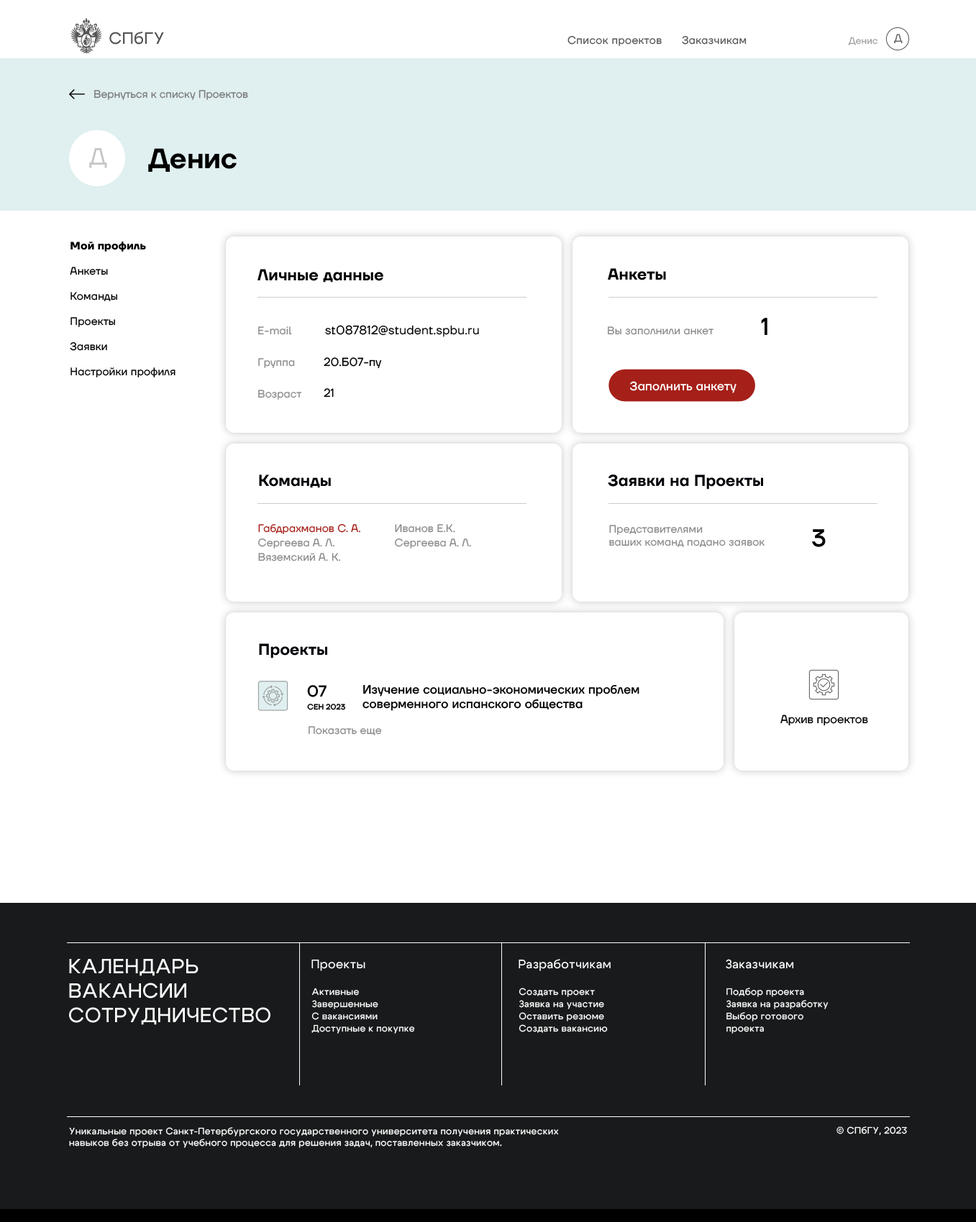
<style>
.page{position:relative;width:976px;height:1222px;background:#ffffff}
.page>*{position:absolute;margin:0}
.t1{font:16.3px "Cygre-Medium";letter-spacing:0.025em;color:#555555}
.t2{font:10.8px "TTFirsNeue-Regular";letter-spacing:0.025em;color:#555555}
.t3{font:9.3px "TTFirsNeue-Regular";letter-spacing:0.01em;color:#9c9c9c}
.t4{font:10.8px "TTFirsNeue-Regular";color:#636466}
.t5{font:10.8px "TTFirsNeue-Regular";color:#77787b}
.t6{font:23.7px "TTFirsNeue-Regular";color:#c4c6c8}
.t7{font:28px "TTFirsNeue-DemiBold";color:#000000}
.t8{font:10.8px/25.2px "TTFirsNeue-Regular";letter-spacing:0.013em;color:#000000}
.t9{font:10.8px/25.2px "TTFirsNeue-Bold";letter-spacing:0.013em;color:#000000}
.t10{font:15.8px "TTFirsNeue-DemiBold";letter-spacing:0.01em;color:#000000}
.t11{font:24.4px "TTFirsNeue-Medium";letter-spacing:0.025em;color:#000000}
.t12{font:10.8px "TTFirsNeue-Regular";letter-spacing:0.01em;color:#898989}
.t13{font:12.2px "TTFirsNeue-Regular";letter-spacing:0.01em;color:#000000}
.t14{font:11.5px "TTFirsNeue-Regular";color:#000000}
.t15{font:12.2px "TTFirsNeue-Medium";letter-spacing:0.01em;color:#ffffff}
.t16{font:15.8px "TTFirsNeue-DemiBold";letter-spacing:0.01em;color:#000007}
.t17{font:10.8px/14.4px "TTFirsNeue-Regular";letter-spacing:0.01em;color:#898989}
.t18{font:10.8px/14.4px "TTFirsNeue-Regular";letter-spacing:0.01em;color:#a52019}
.t19{font:15.9px "TTFirsNeue-Medium";color:#000000}
.t20{font:12.2px "TTFirsNeue-Medium";letter-spacing:0.01em;color:#000000}
.t21{font:7.8px "TTFirsNeue-Medium";color:#000000}
.t22{font:20.4px "Cygre-Medium";letter-spacing:0.025em;color:#ffffff}
.t23{font:12.2px "Cygre-Medium";letter-spacing:0.025em;color:#ffffff}
.t24{font:9.4px/12.2px "Cygre-Medium";letter-spacing:0.025em;color:#ffffff}
.t25{font:9.4px "Cygre-Medium";letter-spacing:0.025em;color:#ffffff}
</style>
<div class="page">
<p class="t1" style="left:109px;top:31px;width:55px;height:14px">СПбГУ</p>
<p class="t2" style="left:567px;top:36px;width:179px;height:10px">Список проектов      Заказчикам</p>
<p class="t3" style="left:848px;top:37px;width:29px;height:8px">Денис</p>
<p class="t4" style="left:894px;top:34px;width:8px;height:10px">Д</p>
<p class="t5" style="left:94px;top:90px;width:154px;height:10px">Вернуться к списку Проектов</p>
<p class="t6" style="left:89px;top:148px;width:18px;height:20px">Д</p>
<p class="t7" style="left:148px;top:148px;width:89px;height:24px">Денис</p>
<p class="t8" style="left:70px;top:242px;width:105px;height:135px"><span class="t9">Мой профиль<br></span>Анкеты<br>Команды<br>Проекты<br>Заявки<br>Настройки профиля</p>
<p class="t10" style="left:257px;top:269px;width:126px;height:14px">Личные данные</p>
<p class="t10" style="left:608px;top:268px;width:58px;height:12px">Анкеты</p>
<p class="t11" style="left:761px;top:318px;width:6px;height:17px">1</p>
<p class="t12" style="left:258px;top:326px;width:34px;height:9px">E-mail</p>
<p class="t13" style="left:325px;top:325px;width:154px;height:12px">st087812@student.spbu.ru</p>
<p class="t12" style="left:608px;top:326px;width:105px;height:9px">Вы заполнили анкет</p>
<p class="t12" style="left:258px;top:358px;width:37px;height:10px">Группа</p>
<p class="t14" style="left:324px;top:357px;width:58px;height:12px">20.Б07-пу</p>
<p class="t12" style="left:258px;top:390px;width:44px;height:10px">Возраст</p>
<p class="t14" style="left:324px;top:388px;width:10px;height:10px">21</p>
<p class="t15" style="left:629px;top:381px;width:107px;height:12px">Заполнить анкету</p>
<p class="t16" style="left:259px;top:475px;width:72px;height:13px">Команды</p>
<p class="t16" style="left:608px;top:475px;width:155px;height:15px">Заявки на Проекты</p>
<p class="t17" style="left:258px;top:524px;width:102px;height:38px"><span class="t18">Габдрахманов С. А.<br></span>Сергеева А. Л.<br>Вяземский А. К.</p>
<p class="t17" style="left:395px;top:524px;width:76px;height:25px">Иванов Е.К. <br>Сергеева А. Л.</p>
<p class="t12" style="left:609px;top:525px;width:155px;height:22px">Представителями<br>ваших команд подано заявок</p>
<p class="t11" style="left:812px;top:529px;width:13px;height:18px">3</p>
<p class="t16" style="left:259px;top:643px;width:68px;height:16px">Проекты</p>
<p class="t19" style="left:307px;top:685px;width:19px;height:12px">07</p>
<p class="t20" style="left:362px;top:684px;width:277px;height:27px">Изучение социально-экономических проблем соверменного испанского общества</p>
<p class="t21" style="left:307px;top:704px;width:39px;height:6px">СЕН 2023</p>
<p class="t14" style="left:780px;top:715px;width:88px;height:11px">Архив проектов</p>
<p class="t12" style="left:308px;top:726px;width:74px;height:9px">Показать еще</p>
<p class="t22" style="left:69px;top:959px;width:201px;height:66px">КАЛЕНДАРЬ<br>ВАКАНСИИ<br>СОТРУДНИЧЕСТВО</p>
<p class="t23" style="left:311px;top:959px;width:54px;height:12px">Проекты</p>
<p class="t23" style="left:518px;top:959px;width:92px;height:12px">Разработчикам</p>
<p class="t23" style="left:725px;top:959px;width:69px;height:10px">Заказчикам</p>
<p class="t24" style="left:311px;top:988px;width:104px;height:46px">Активные<br>Завершенные<br>С вакансиями<br>Доступные к покупке</p>
<p class="t24" style="left:518px;top:988px;width:90px;height:45px">Создать проект<br>Заявка на участие<br>Оставить резюме<br>Создать вакансию</p>
<p class="t24" style="left:726px;top:988px;width:102px;height:46px">Подбор проекта<br>Заявка на разработку<br>Выбор готового<br>проекта</p>
<p class="t25" style="left:69px;top:1127px;width:490px;height:21px">Уникальные проект Санкт-Петербургского государственного университета получения практических навыков без отрыва от учебного процесса для решения задач, поставленных заказчиком.</p>
<p class="t25" style="left:836px;top:1127px;width:71px;height:9px">© СПбГУ, 2023</p>
</div>
